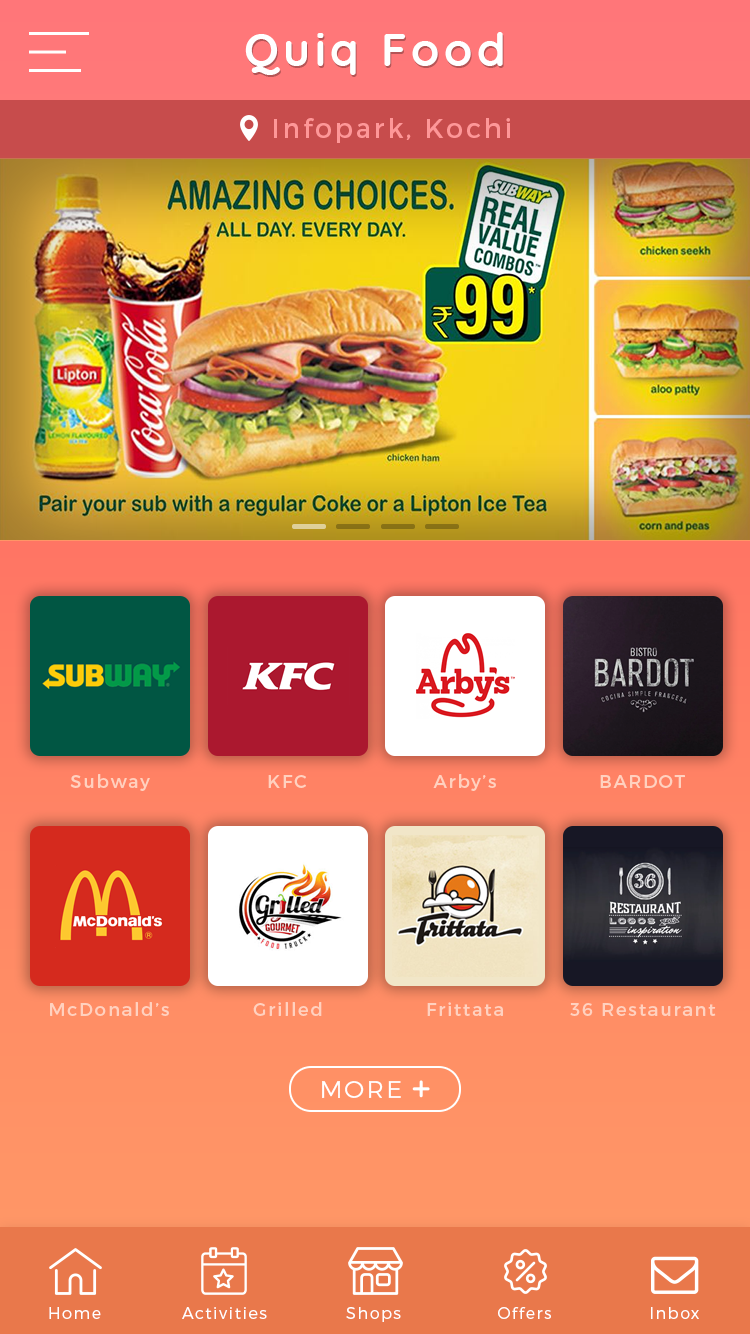
<style>
.page{position:relative;width:750px;height:1334px}
.page>*{position:absolute;margin:0}
.t1{font:46px "Quicksand-Bold";letter-spacing:0.1em;color:#ffffff}
.t2{font:27px "Montserrat-Regular";letter-spacing:0.1em;color:#fe9798}
.t3{font:18px "Montserrat-Regular";letter-spacing:0.1em;color:#ffd1bf}
.t4{font:24px "Montserrat-Light";letter-spacing:0.1em;color:#ffffff}
.t5{font:16px "Montserrat-Light";letter-spacing:0.1em;color:#ffffff}
</style>
<div class="page">
<p class="t1" style="left:245px;top:32px;width:258px;height:43px">Quiq Food</p>
<p class="t2" style="left:274px;top:118px;width:236px;height:25px">Infopark, Kochi</p>
<p class="t3" style="left:70px;top:774px;width:80px;height:17px">Subway</p>
<p class="t3" style="left:433px;top:774px;width:63px;height:17px">Arby’s</p>
<p class="t3" style="left:268px;top:775px;width:38px;height:13px">KFC</p>
<p class="t3" style="left:600px;top:775px;width:85px;height:13px">BARDOT</p>
<p class="t3" style="left:50px;top:1002px;width:119px;height:14px">McDonald’s</p>
<p class="t3" style="left:253px;top:1002px;width:69px;height:14px">Grilled</p>
<p class="t3" style="left:427px;top:1002px;width:76px;height:14px">Frittata</p>
<p class="t3" style="left:570px;top:1003px;width:146px;height:13px">36 Restaurant</p>
<p class="t4" style="left:322px;top:1081px;width:79px;height:17px">MORE</p>
<p class="t5" style="left:49px;top:1307px;width:52px;height:12px">Home</p>
<p class="t5" style="left:182px;top:1307px;width:85px;height:12px">Activities</p>
<p class="t5" style="left:346px;top:1307px;width:55px;height:15px">Shops</p>
<p class="t5" style="left:498px;top:1307px;width:53px;height:12px">Offers</p>
<p class="t5" style="left:651px;top:1307px;width:48px;height:12px">Inbox</p>
</div>
